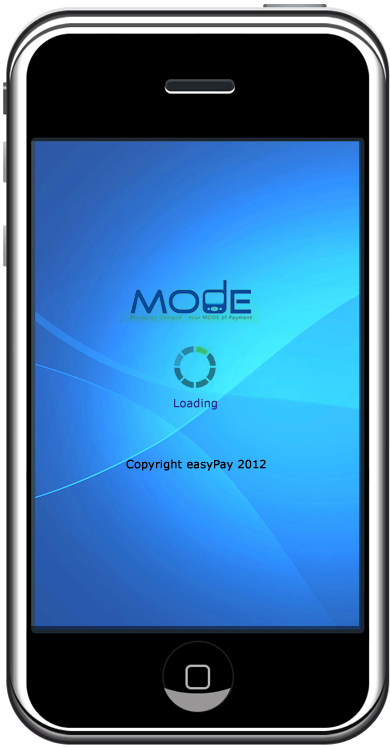
<style>
.page{position:relative;width:390px;height:747px;background:#000000}
.page>*{position:absolute;margin:0}
.t1{font:11px "Verdana";color:#2e3192;font-weight:bold}
.t2{font:11px "Verdana";color:#000000;font-weight:bold}
</style>
<div class="page">
<p class="t1" style="left:174px;top:398px;width:43px;height:12px">Loading</p>
<p class="t2" style="left:126px;top:459px;width:140px;height:12px">Copyright easyPay 2012</p>
</div>
